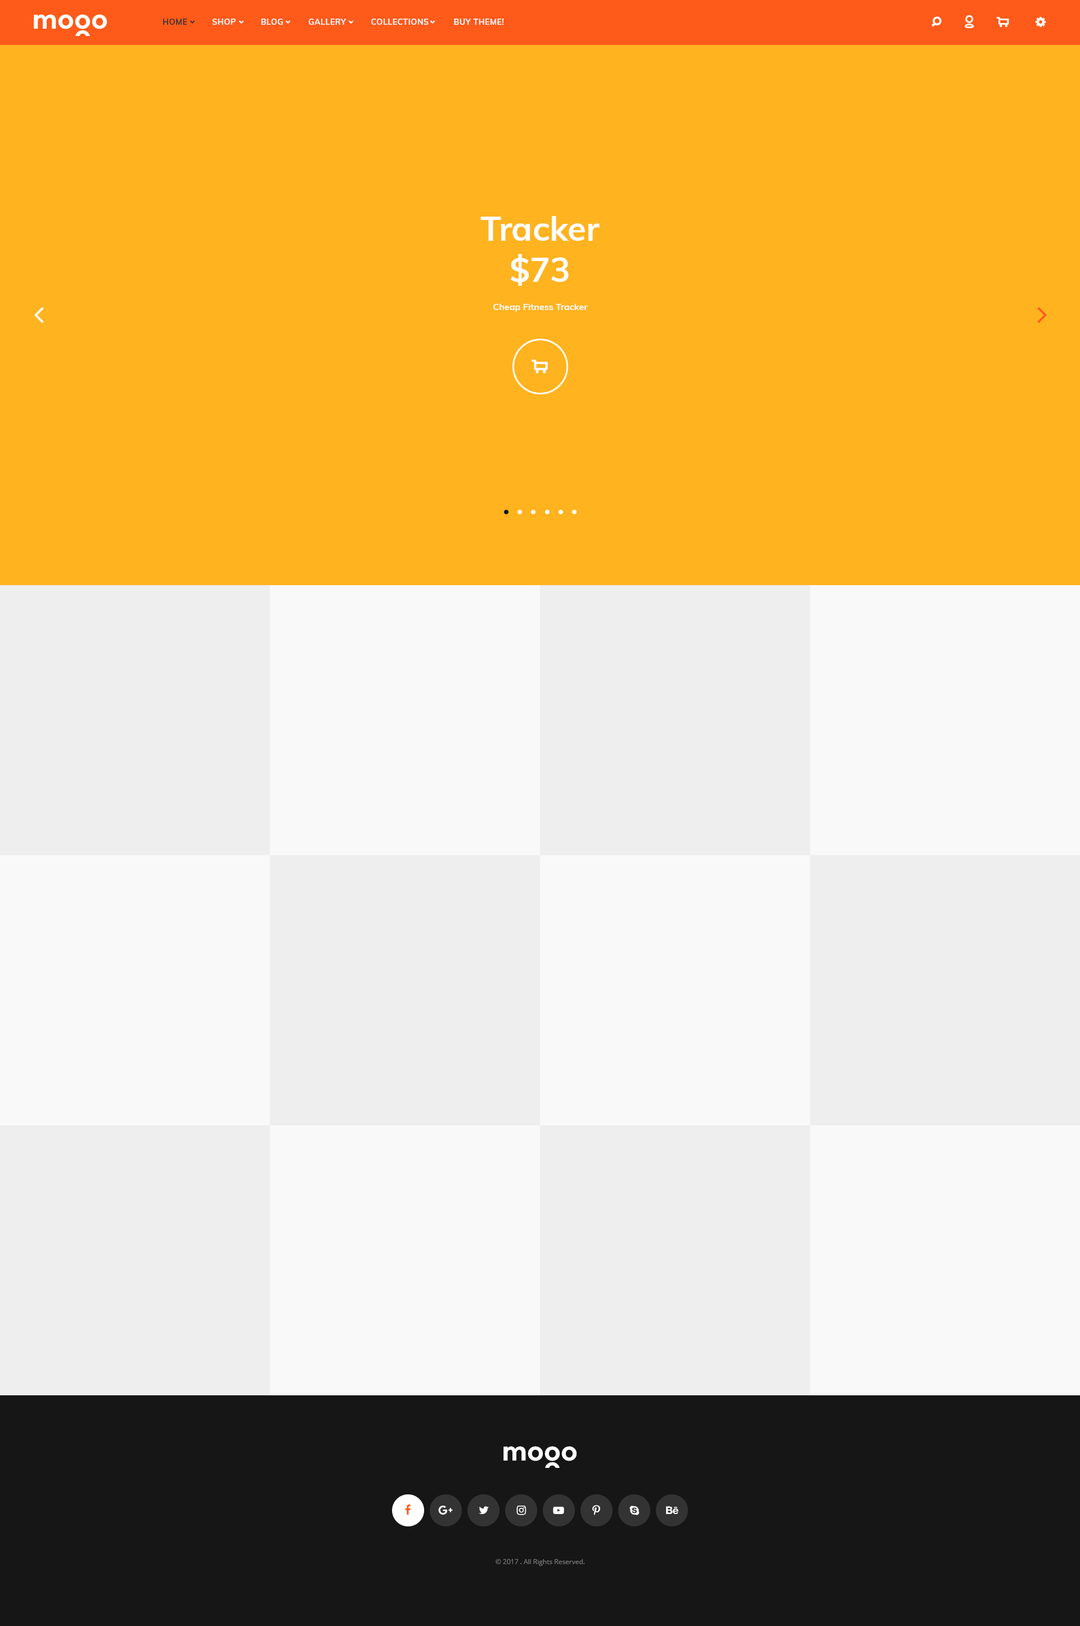
<style>
.page{position:relative;width:1080px;height:1626px;background:#ffb31f}
.page>*{position:absolute;margin:0}
.t1{font:7.9px "Muli-Bold";letter-spacing:0.04em;color:#ffffff;text-transform:uppercase}
.t2{font:7.9px "Muli-Bold";letter-spacing:0.04em;color:#333333;text-transform:uppercase}
.t3{font:33.8px/41.1px "Muli-Bold";color:#ffffff}
.t4{font:9px "Muli-Bold";color:#ffffff}
.t5{font:25.9px "Montserrat-Bold";color:#ffffff}
.t6{font:6.8px "OpenSans";color:#777777}
</style>
<div class="page">
<p class="t1" style="left:163px;top:19px;width:341px;height:6px"><span class="t2">hOME</span>          Shop          bLOG          gALLERY          Collections          BUY THEME!</p>
<p class="t3" style="left:480px;top:216px;width:120px;height:70px;text-align:center">Tracker<br>$73</p>
<p class="t4" style="left:493px;top:304px;width:95px;height:8px">Cheap Fitness Tracker</p>
<p class="t5" style="left:503px;top:1446px;width:74px;height:15px">mooo</p>
<p class="t6" style="left:496px;top:1559px;width:89px;height:6px">© 2017 . All Rights Reserved.</p>
</div>
